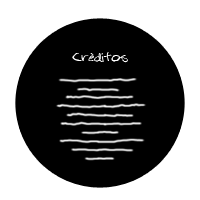
<style>
.page{position:relative;width:200px;height:200px;background:#000000}
.page>*{position:absolute;margin:0}
.t1{font:10.7px "2Dumb";color:#ffffff}
</style>
<div class="page">
<p class="t1" style="left:72px;top:52px;width:56px;height:11px">Créditos</p>
</div>
